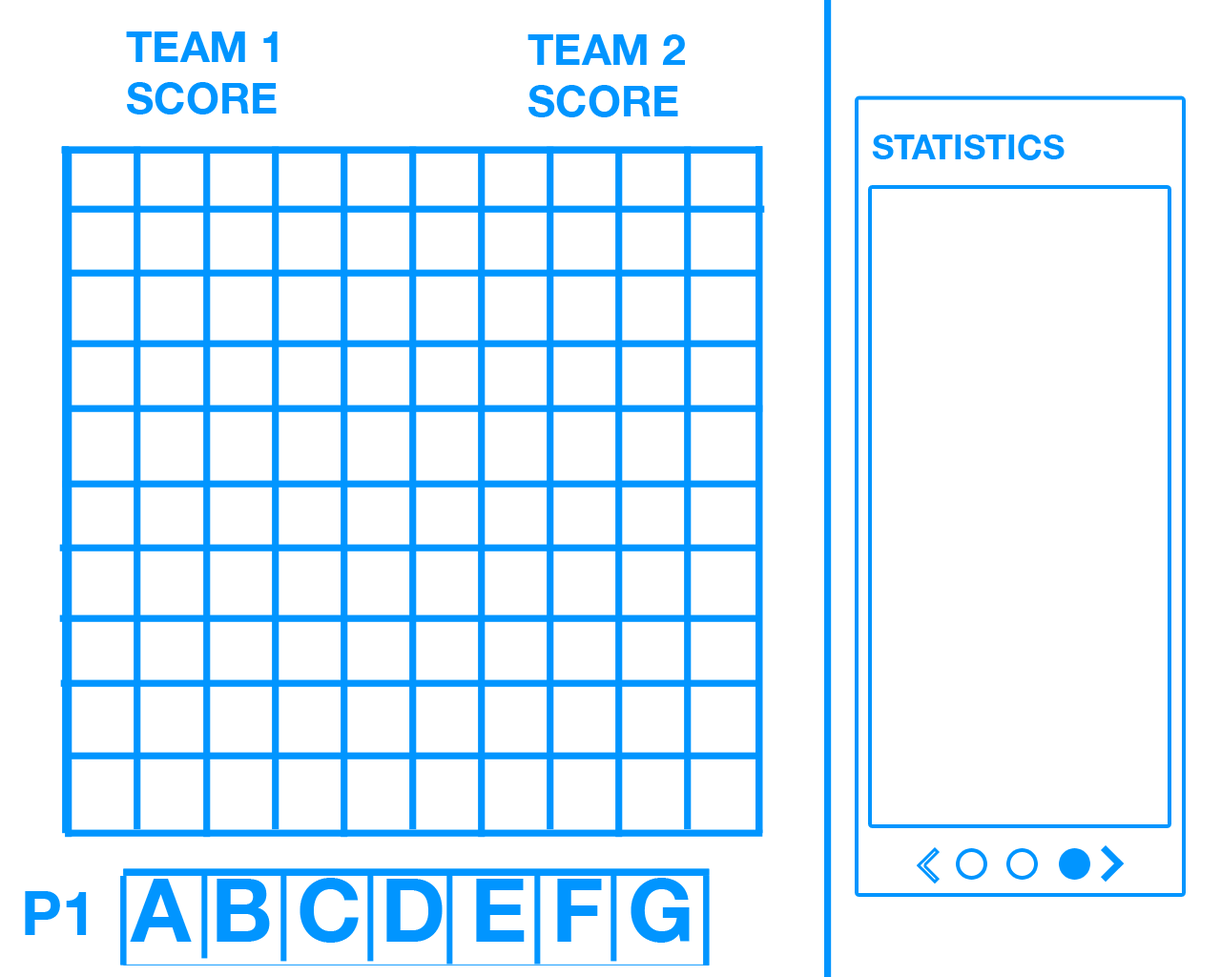
<style>
.page{position:relative;width:1221px;height:977px;background:#ffffff}
.page>*{position:absolute;margin:0}
.t1{font:42.9px "HelveticaNeue-Bold";color:#0195ff;text-transform:uppercase}
.t2{font:34.3px "HelveticaNeue-Bold";color:#0195ff;text-transform:uppercase}
.t3{font:87.8px "HelveticaNeue-Bold";color:#0195ff;text-transform:uppercase}
.t4{font:61px "HelveticaNeue-Bold";color:#0195ff;text-transform:uppercase}
</style>
<div class="page">
<p class="t1" style="left:126px;top:31px;width:152px;height:83px">Team 1 <br>Score</p>
<p class="t1" style="left:527px;top:34px;width:158px;height:83px">Team 2 <br>Score</p>
<p class="t2" style="left:872px;top:134px;width:192px;height:26px">Statistics</p>
<p class="t3" style="left:130px;top:878px;width:560px;height:64px">A b c d e f g</p>
<p class="t4" style="left:25px;top:891px;width:62px;height:44px">p1</p>
</div>
